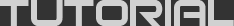
<style>
.page{position:relative;width:234px;height:26px;background:#333333}
.page>*{position:absolute;margin:0}
.t1{font:50px "Bitsumishi";color:#d1d1d1}
</style>
<div class="page">
<p class="t1" style="left:0px;top:0px;width:234px;height:26px">tutorial</p>
</div>
